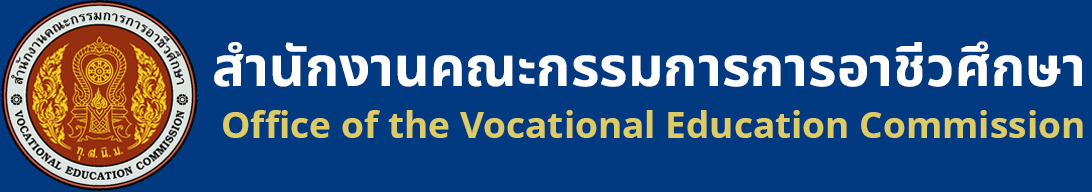
<style>
.page{position:relative;width:1092px;height:192px;background:#023a81}
.page>*{position:absolute;margin:0}
.t1{font:55px "NotoSansThai-Bold";color:#ffffff}
.t2{font:37px "NotoSans-Bold";color:#ddcc66}
</style>
<div class="page">
<p class="t1" style="left:214px;top:41px;width:868px;height:46px">สำนักงานคณะกรรมการการอาชีวศึกษา</p>
<p class="t2" style="left:223px;top:110px;width:860px;height:28px">Office of the Vocational Education Commission</p>
</div>
